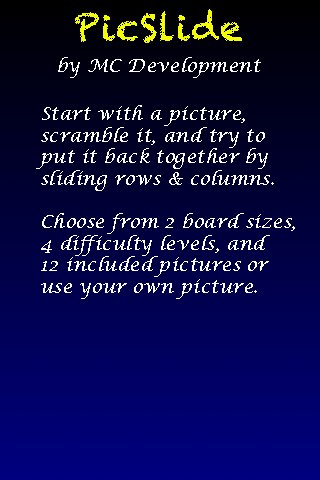
<style>
.page{position:relative;width:320px;height:480px}
.page>*{position:absolute;margin:0}
.t1{font:36px "Chalkduster";letter-spacing:0.025em;color:#f4fd01}
.t2{font:18px "LucidaCalligraphy-Italic";letter-spacing:0.025em;color:#fefefe}
</style>
<div class="page">
<p class="t1" style="left:75px;top:9px;width:167px;height:34px">PicSlide</p>
<p class="t2" style="left:58px;top:57px;width:203px;height:21px">by MC Development</p>
<p class="t2" style="left:36px;top:105px;width:259px;height:194px">Start with a picture,<br>scramble it, and try to  <br>put it back together by <br>sliding rows &amp; columns.<br> <br>Choose from 2 board sizes,<br>4 difficulty levels, and <br>12 included pictures or <br>use your own picture.</p>
</div>
